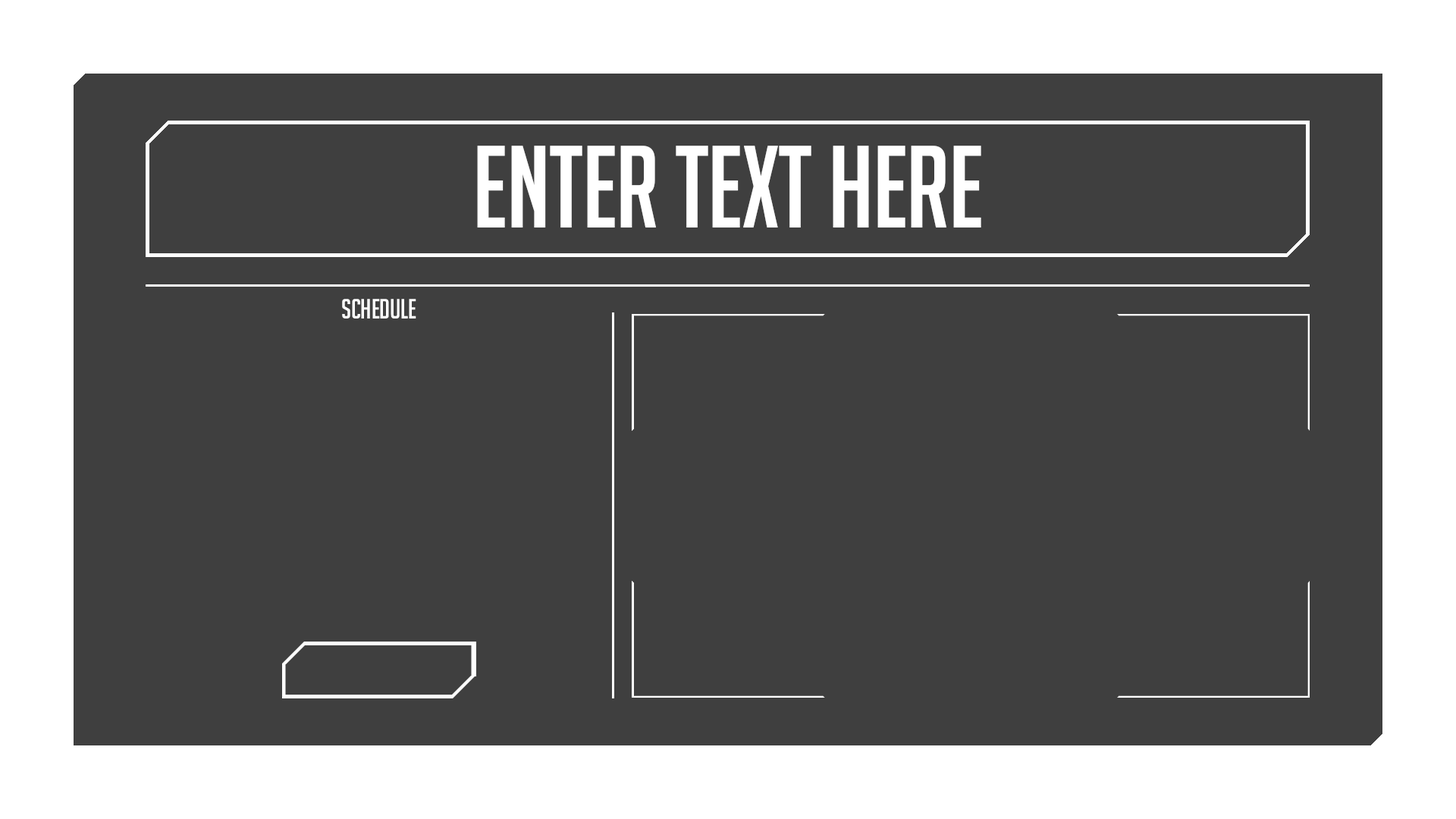
<style>
.page{position:relative;width:1456px;height:819px;background:#3f3f3f}
.page>*{position:absolute;margin:0}
.t1{font:113.7px "BigNoodleTitling";letter-spacing:-0.01em;color:#ffffff}
</style>
<div class="page">
<p class="t1" style="left:477px;top:146px;width:504px;height:81px">Enter Text Here</p>
</div>
